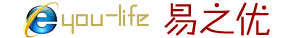
<style>
.page{position:relative;width:300px;height:38px;background:#ffffff}
.page>*{position:absolute;margin:0}
.t1{font:36px "FZZHYJW--GB1-0";color:#c2ae57}
.t2{font:36px "FZZHYJW--GB1-0";color:#9a0000}
</style>
<div class="page">
<p class="t1" style="left:61px;top:4px;width:88px;height:31px">you-life</p>
<p class="t2" style="left:164px;top:2px;width:106px;height:34px">易之优</p>
</div>
